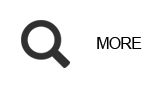
<style>
.page{position:relative;width:160px;height:90px;background:#ffffff}
.page>*{position:absolute;margin:0}
.t1{font:16px "ArialMT";letter-spacing:-0.05em;color:#000000}
</style>
<div class="page">
<p class="t1" style="left:97px;top:37px;width:45px;height:12px">MORE</p>
</div>
